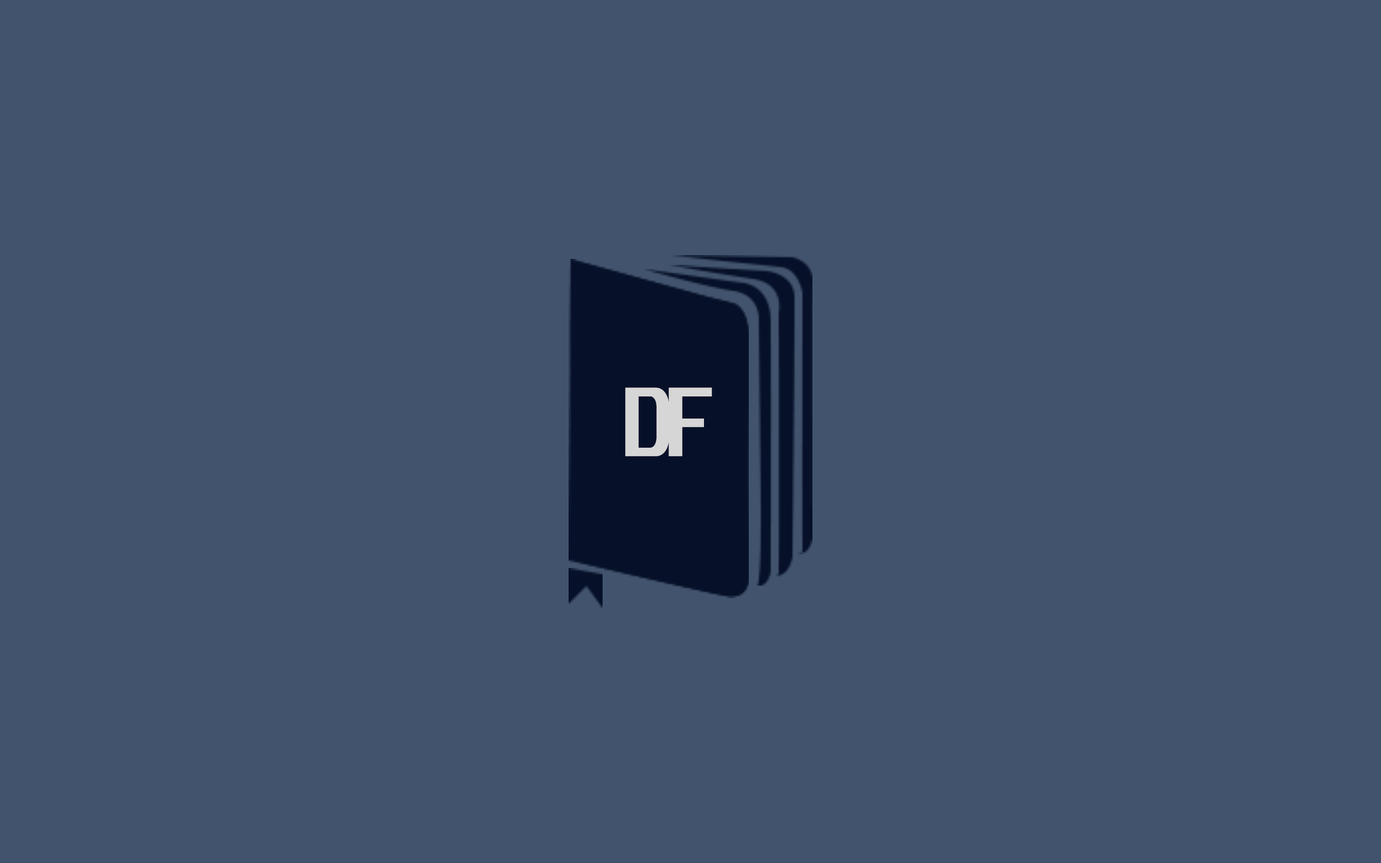
<style>
.page{position:relative;width:1381px;height:863px;background:#42546d}
.page>*{position:absolute;margin:0}
.t1{font:84.6px "Unispace-Bold";letter-spacing:-0.1em;color:#d6d6d6}
</style>
<div class="page">
<p class="t1" style="left:625px;top:387px;width:87px;height:69px">DF</p>
</div>
